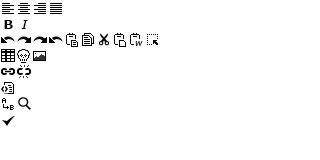
<style>
.page{position:relative;width:320px;height:160px;background:#ffffff}
.page>*{position:absolute;margin:0}
.t1{font:13px "Verdana-Bold";color:#000000}
.t2{font:13px "Verdana-Italic";color:#000000}
.t3{font:9px "Verdana-Italic";color:#000000}
</style>
<div class="page">
<p class="t1" style="left:4px;top:20px;width:9px;height:9px">B</p>
<p class="t2" style="left:21px;top:20px;width:7px;height:9px">I</p>
<p class="t3" style="left:135px;top:41px;width:8px;height:5px">w</p>
</div>
